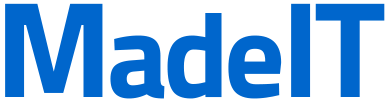
<style>
.page{position:relative;width:390px;height:100px;background:#ffffff}
.page>*{position:absolute;margin:0}
.t1{font:120px "TitilliumWeb-Bold";letter-spacing:-0.04em;color:#0066cc}
.t2{font:137px "TitilliumWeb-Bold";letter-spacing:-0.04em;color:#0066cc}
</style>
<div class="page">
<p class="t1" style="left:5px;top:3px;width:380px;height:96px"><span class="t2">M</span>ade<span class="t2">IT</span></p>
</div>
